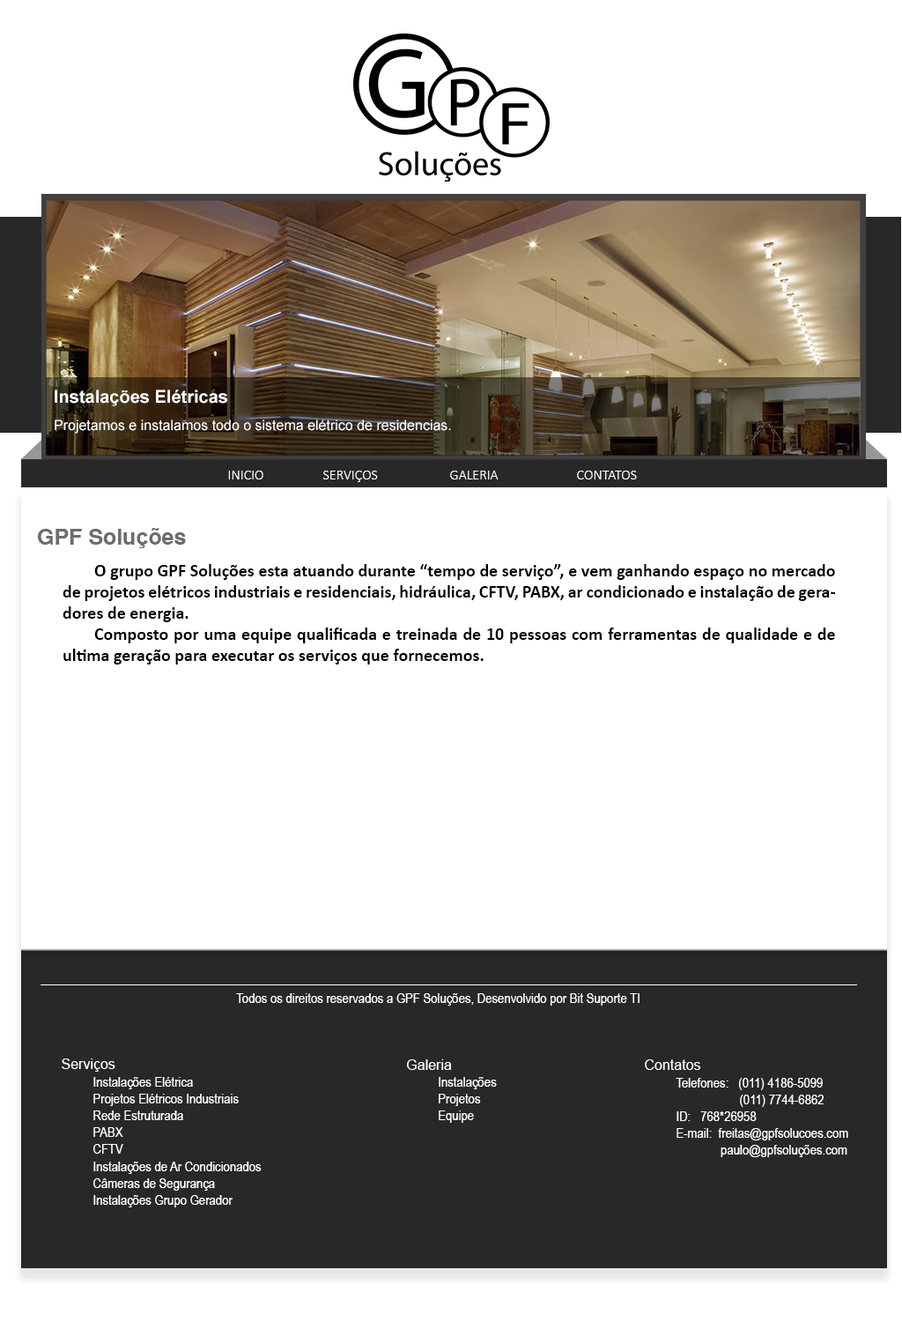
<style>
.page{position:relative;width:902px;height:1322px;background:#ffffff}
.page>*{position:absolute;margin:0}
.t1{font:17.6px "Arial-BoldMT";color:#ffffff}
.t2{font:14.1px "ArialMT";color:#ffffff}
.t3{font:14.1px "Calibri-Light";color:#ffffff}
.t4{font:22px "SansSerifBold";color:#6c6c6c}
.t5{font:22px "Arial-BoldMT";color:#6c6c6c}
.t6{font:17.6px "Calibri-Bold";color:#000000}
.t7{font:14.1px "ArialNarrow";color:#ffffff}
</style>
<div class="page">
<p class="t1" style="left:55px;top:389px;width:172px;height:17px">Instalações Elétricas</p>
<p class="t2" style="left:55px;top:419px;width:396px;height:14px">Projetamos e instalamos todo o sistema elétrico de residencias.</p>
<p class="t3" style="left:228px;top:471px;width:409px;height:11px">INICIO  SERVIÇOS   GALERIA   CONTATOS</p>
<p class="t4" style="left:37px;top:528px;width:149px;height:20px">GPF Solu<span class="t5">çõ</span>es</p>
<p class="t6" style="left:63px;top:564px;width:772px;height:100px;text-align:justify">O grupo GPF Soluções esta atuando durante “tempo de serviço”, e vem ganhando espaço no mercado de projetos elétricos industriais e residenciais, hidráulica, CFTV, PABX, ar condicionado e instalação de geradores de energia.<br> Composto por uma equipe qualificada e treinada de 10 pessoas com ferramentas de qualidade e de ultima geração para executar os serviços que fornecemos.</p>
<p class="t7" style="left:236px;top:993px;width:404px;height:12px">Todos os direitos reservados a GPF Soluções, Desenvolvido por Bit Suporte TI</p>
<p class="t7" style="left:62px;top:1058px;width:200px;height:149px;text-align:justify"><span class="t2">Serviços<br> </span>Instalações Elétrica<br> Projetos Elétricos Industriais<br> Rede Estruturada<br> PABX<br> CFTV<br> Instalações de Ar Condicionados<br> Câmeras de Segurança<br> Instalações Grupo Gerador</p>
<p class="t7" style="left:407px;top:1059px;width:90px;height:64px;text-align:justify"><span class="t2">Galeria<br> </span>Instalações<br> Projetos<br> Equipe</p>
<p class="t7" style="left:645px;top:1059px;width:203px;height:98px;text-align:justify"><span class="t2">Contatos<br> </span>Telefones:   (011) 4186-5099<br>   (011) 7744-6862<br> ID:   768*26958<br> E-mail:  freitas@gpfsolucoes.com<br>      paulo@gpfsoluções.com</p>
</div>
